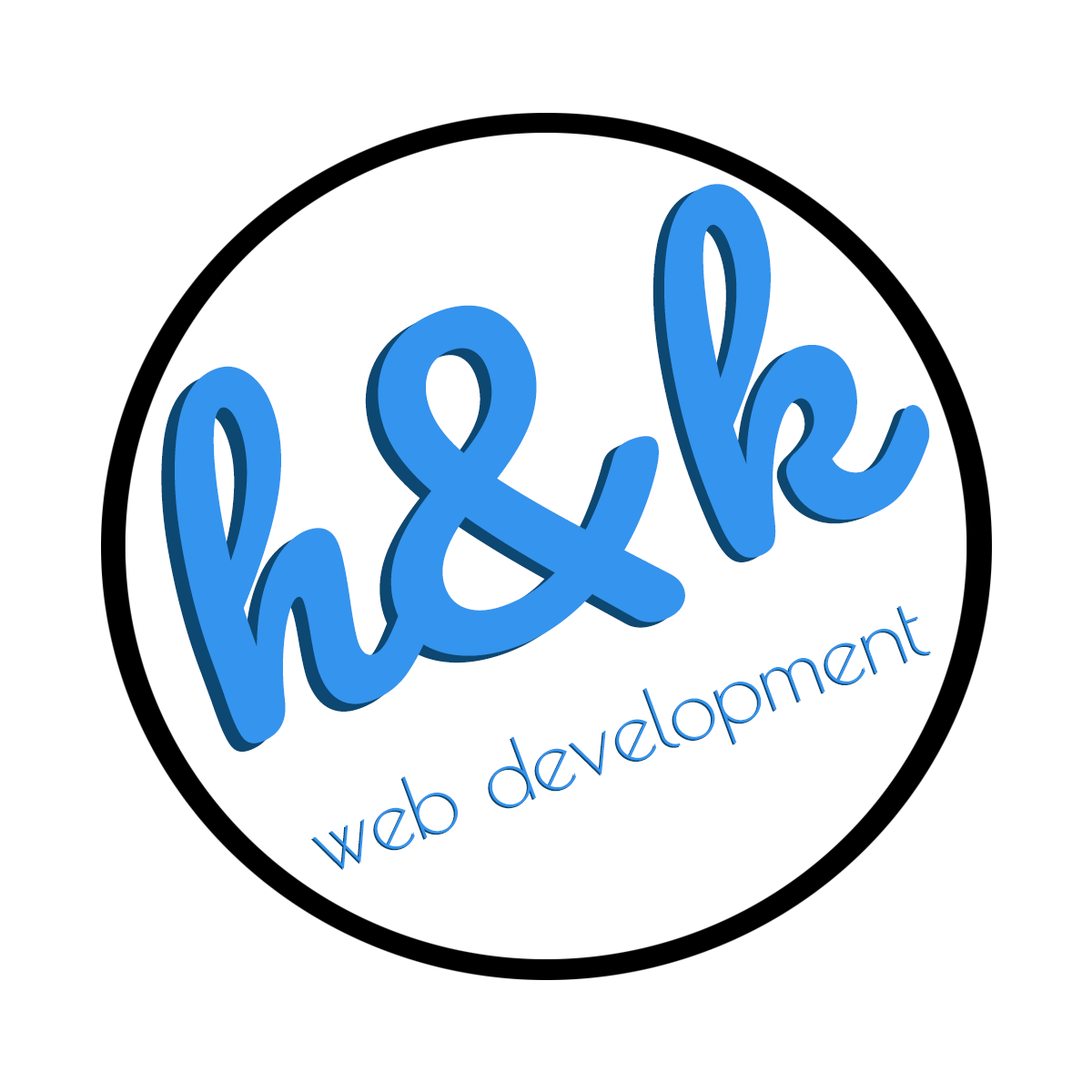
<style>
.page{position:relative;width:1092px;height:1092px;background:#ffffff}
.page>*{position:absolute;margin:0}
.t1{font:386.4px "Pacifico-Regular";color:#3594ed}
.t2{font:386.3px "Pacifico-Regular";color:#3594ed}
.t3{font:86.5px "PoiretOne-Regular";color:#3594ed}
.t4{font:86.5px "PoiretOne-Regular"}
</style>
<div class="page">
<p class="t1" style="left:175px;top:184px;width:755px;height:559px;rotate:-20deg">h&amp;k</p>
<p class="t2" style="left:161px;top:188px;width:760px;height:564px;rotate:-21deg">h&amp;k</p>
<p class="t3" style="left:312px;top:605px;width:619px;height:264px;rotate:-20deg">web development</p>
<p class="t4" style="left:311px;top:607px;width:619px;height:264px;rotate:-20deg">web development</p>
</div>
